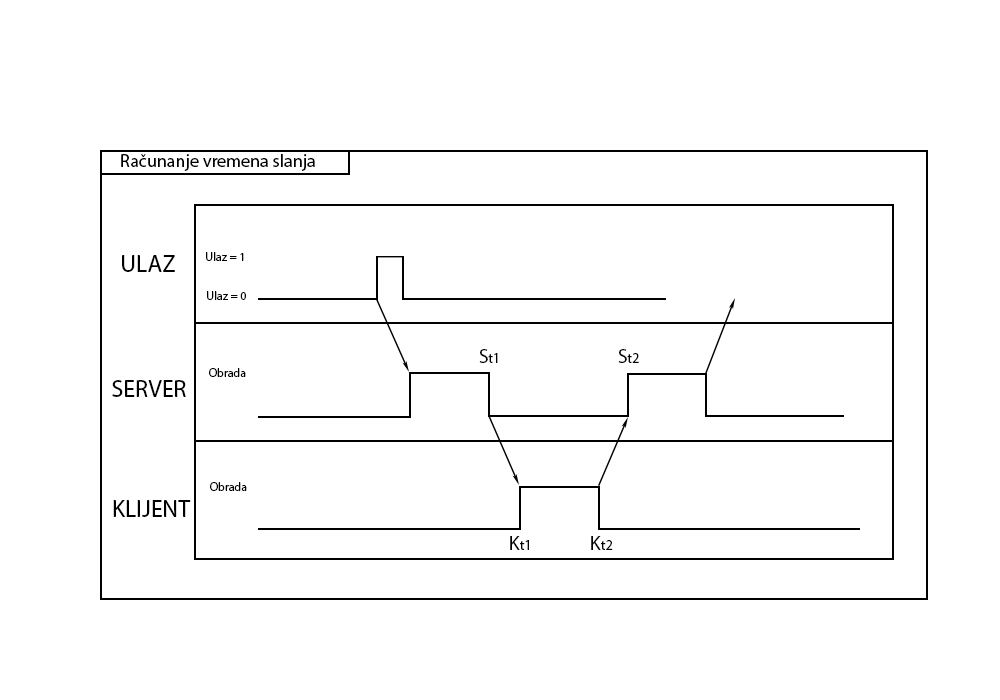
<style>
.page{position:relative;width:1000px;height:700px;background:#ffffff}
.page>*{position:absolute;margin:0}
.t1{font:18px "MyriadPro-Regular";color:#000000}
.t2{font:24px "MyriadPro-Regular";color:#000000}
.t3{font:12px "MyriadPro-Regular";color:#000000}
.t4{font:14px "MyriadPro-Regular";color:#000000}
.t5{font:20px "MyriadPro-Regular";color:#000000}
</style>
<div class="page">
<p class="t1" style="left:121px;top:154px;width:194px;height:17px">Računanje vremena slanja</p>
<p class="t2" style="left:122px;top:255px;width:53px;height:17px">ULAZ</p>
<p class="t3" style="left:206px;top:252px;width:38px;height:9px">Ulaz = 1</p>
<p class="t3" style="left:207px;top:291px;width:39px;height:9px">Ulaz = 0</p>
<p class="t4" style="left:479px;top:349px;width:19px;height:14px"><span class="t5">S</span>t1</p>
<p class="t4" style="left:618px;top:349px;width:21px;height:14px"><span class="t5">S</span>t2</p>
<p class="t3" style="left:209px;top:368px;width:37px;height:9px">Obrada</p>
<p class="t2" style="left:112px;top:380px;width:74px;height:17px">SERVER</p>
<p class="t3" style="left:210px;top:482px;width:37px;height:9px">Obrada</p>
<p class="t2" style="left:113px;top:500px;width:78px;height:17px">KLIJENT</p>
<p class="t4" style="left:510px;top:536px;width:19px;height:14px"><span class="t5">K</span>t1</p>
<p class="t4" style="left:591px;top:536px;width:22px;height:14px"><span class="t5">K</span>t2</p>
</div>
